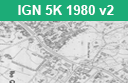
<style>
.page{position:relative;width:128px;height:83px}
.page>*{position:absolute;margin:0}
.t1{font:13.3px "Arial-BoldMT";color:#ffffff}
</style>
<div class="page">
<p class="t1" style="left:18px;top:5px;width:96px;height:10px">IGN 5K 1980 v2</p>
</div>
